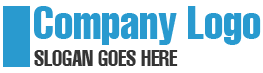
<style>
.page{position:relative;width:263px;height:73px;background:#ffffff}
.page>*{position:absolute;margin:0}
.t1{font:45px "HelveticaLT-Compressed";color:#299acf}
.t2{font:22px "HelveticaLT-Compressed";color:#343434;text-transform:uppercase}
</style>
<div class="page">
<p class="t1" style="left:34px;top:6px;width:227px;height:39px">Company Logo</p>
<p class="t2" style="left:34px;top:50px;width:144px;height:16px">slogan goes here</p>
</div>
